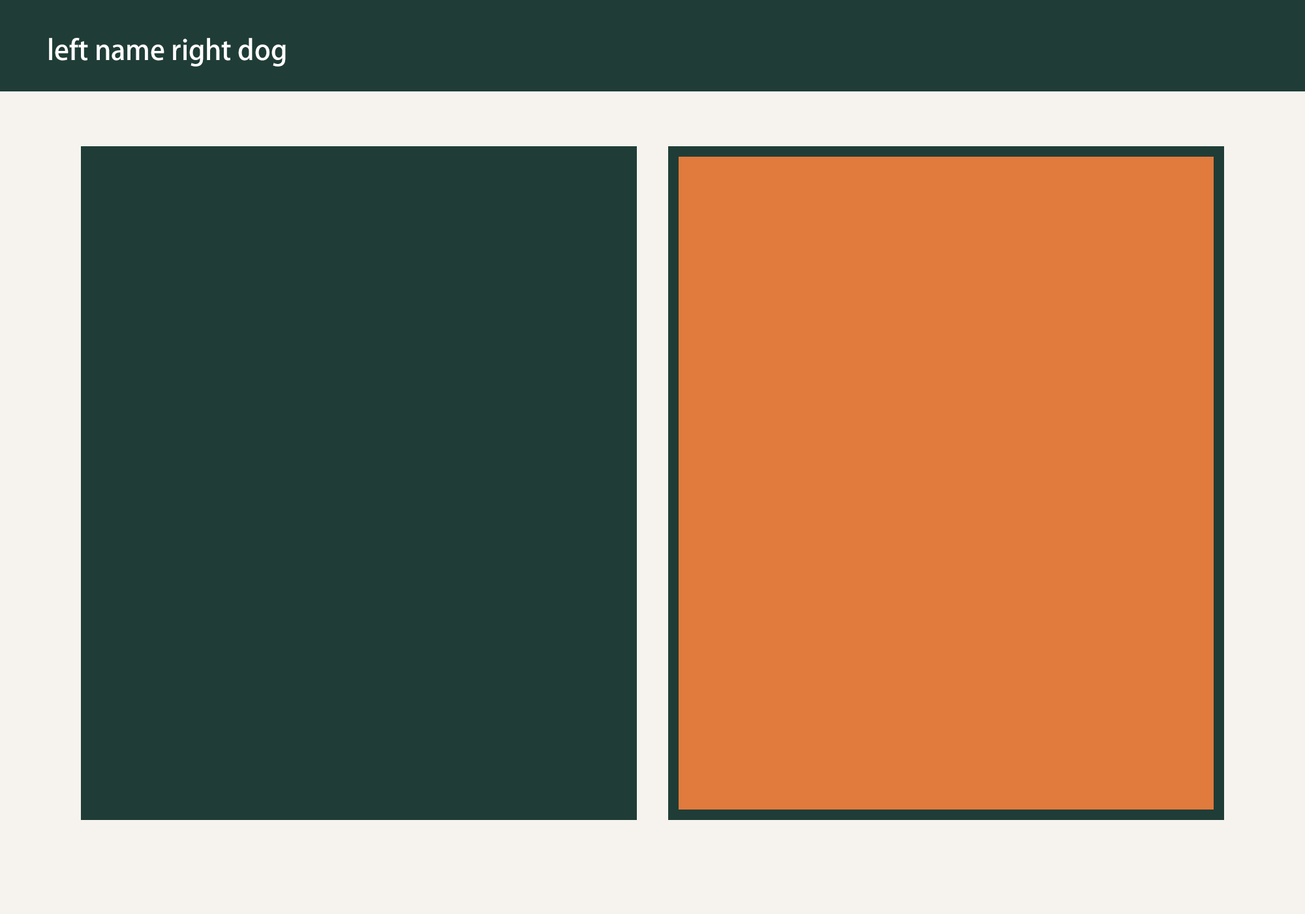
<style>
.page{position:relative;width:1305px;height:914px;background:#1f3d36}
.page>*{position:absolute;margin:0}
.t1{font:27.4px "AdobeHeitiStd-Regular";color:#ffffff}
</style>
<div class="page">
<p class="t1" style="left:49px;top:38px;width:237px;height:29px">left name right dog</p>
</div>
